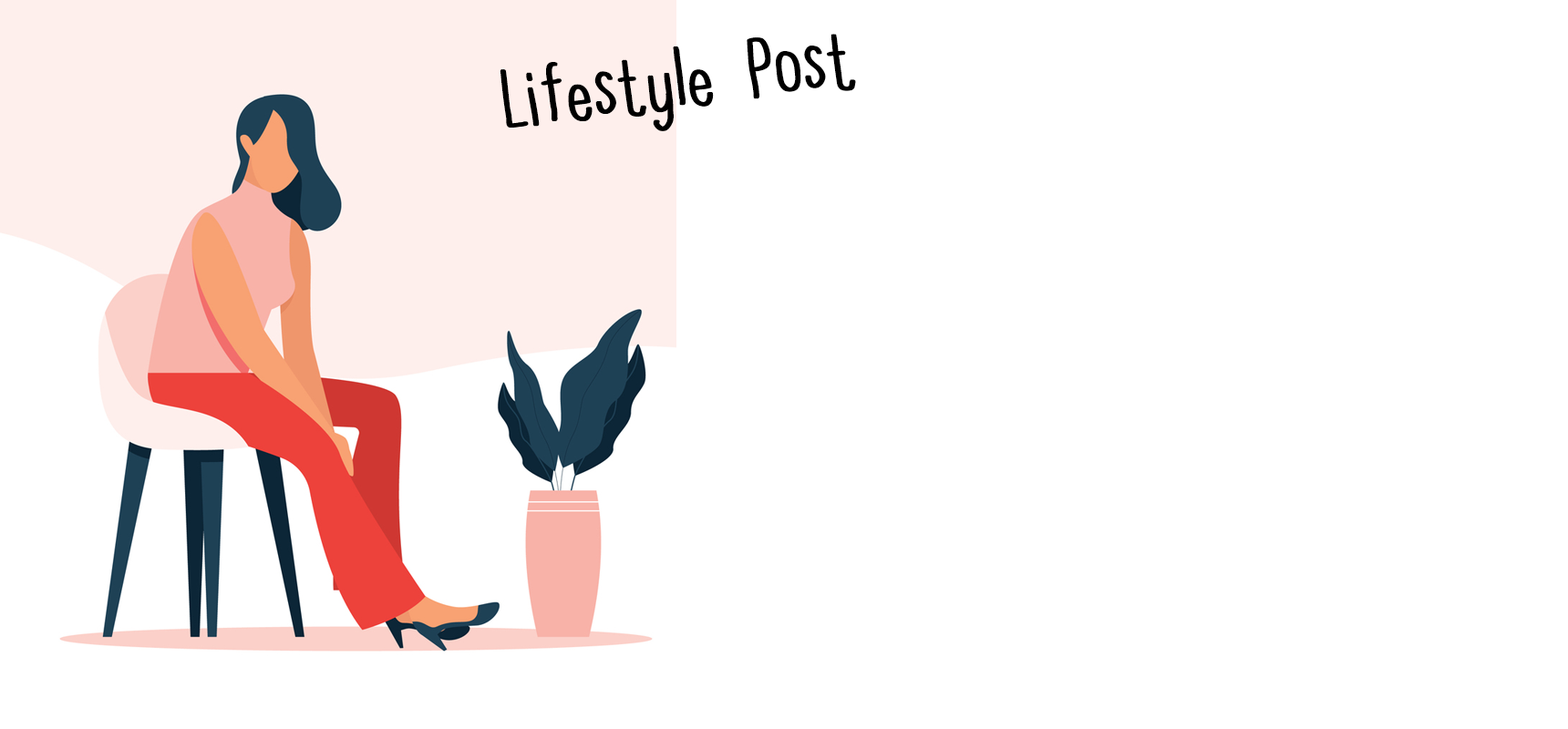
<style>
.page{position:relative;width:1568px;height:729px;background:#ffffff}
.page>*{position:absolute;margin:0}
.t1{font:136.7px "QXLatypeCondensed";color:#000000}
</style>
<div class="page">
<p class="t1" style="left:500px;top:34px;width:354px;height:97px;rotate:-7deg">Lifestyle Post</p>
<p class="t1" style="left:501px;top:34px;width:355px;height:97px;rotate:-7deg">Lifestyle Post</p>
</div>
